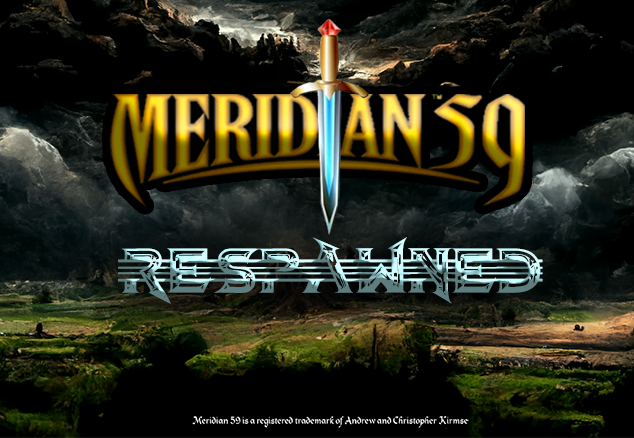
<style>
.page{position:relative;width:634px;height:438px;background:#000000}
.page>*{position:absolute;margin:0}
.t1{font:95.8px "Barbarian"}
.t2{font:10.8px "Heidelberg-Normal";color:#ffffff}
</style>
<div class="page">
<p class="t1" style="left:118px;top:237px;width:425px;height:67px">respawned</p>
<p class="t2" style="left:192px;top:416px;width:277px;height:12px">Meridian 59 is a registered trademark of Andrew and Christopher Kirmse</p>
</div>
